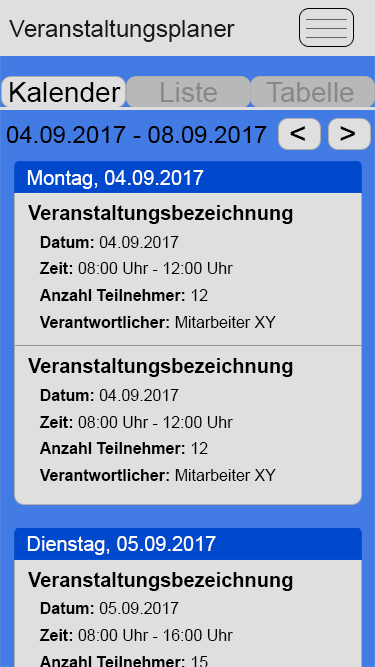
<style>
.page{position:relative;width:375px;height:667px;background:#dfdfdf}
.page>*{position:absolute;margin:0}
.t1{font:24px "ArialMT";color:#191919}
.t2{font:28px "ArialMT";color:#000000}
.t3{font:28px "ArialMT";color:#888888}
.t4{font:24px "ArialMT";color:#000000}
.t5{font:30px "ArialMT";color:#000000}
.t6{font:20px "ArialMT";color:#ffffff}
.t7{font:20px "Arial-BoldMT";color:#000000}
.t8{font:16px/26.7px "ArialMT";color:#000000}
.t9{font:16px/26.7px "Arial-BoldMT";color:#000000}
</style>
<div class="page">
<p class="t1" style="left:9px;top:19px;width:226px;height:23px">Veranstaltungsplaner</p>
<p class="t2" style="left:10px;top:82px;width:111px;height:20px">Kalender</p>
<p class="t3" style="left:161px;top:82px;width:56px;height:20px">Liste</p>
<p class="t3" style="left:266px;top:82px;width:88px;height:20px">Tabelle</p>
<p class="t4" style="left:6px;top:126px;width:261px;height:17px">04.09.2017 - 08.09.2017</p>
<p class="t5" style="left:290px;top:126px;width:15px;height:15px">&lt;</p>
<p class="t5" style="left:340px;top:126px;width:15px;height:15px">&gt;</p>
<p class="t6" style="left:27px;top:170px;width:177px;height:19px">Montag, 04.09.2017</p>
<p class="t7" style="left:28px;top:205px;width:265px;height:19px">Veranstaltungsbezeichnung</p>
<p class="t8" style="left:39px;top:236px;width:237px;height:92px"><span class="t9">Datum: </span>04.09.2017<br><span class="t9">Zeit: </span>08:00 Uhr - 12:00 Uhr<br><span class="t9">Anzahl Teilnehmer: </span>12<br><span class="t9">Verantwortlicher: </span>Mitarbeiter XY</p>
<p class="t7" style="left:28px;top:358px;width:265px;height:19px">Veranstaltungsbezeichnung</p>
<p class="t8" style="left:39px;top:389px;width:237px;height:92px"><span class="t9">Datum: </span>04.09.2017<br><span class="t9">Zeit: </span>08:00 Uhr - 12:00 Uhr<br><span class="t9">Anzahl Teilnehmer: </span>12<br><span class="t9">Verantwortlicher: </span>Mitarbeiter XY</p>
<p class="t6" style="left:27px;top:536px;width:189px;height:19px">Dienstag, 05.09.2017</p>
<p class="t7" style="left:28px;top:572px;width:265px;height:19px">Veranstaltungsbezeichnung</p>
</div>
